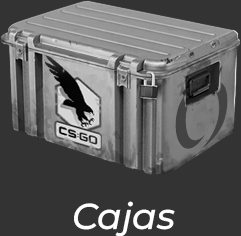
<style>
.page{position:relative;width:241px;height:236px;background:#333333}
.page>*{position:absolute;margin:0}
.t1{font:36px "MontserratItalic-MediumItalic";color:#ffffff}
</style>
<div class="page">
<p class="t1" style="left:74px;top:201px;width:101px;height:36px">Cajas</p>
</div>
